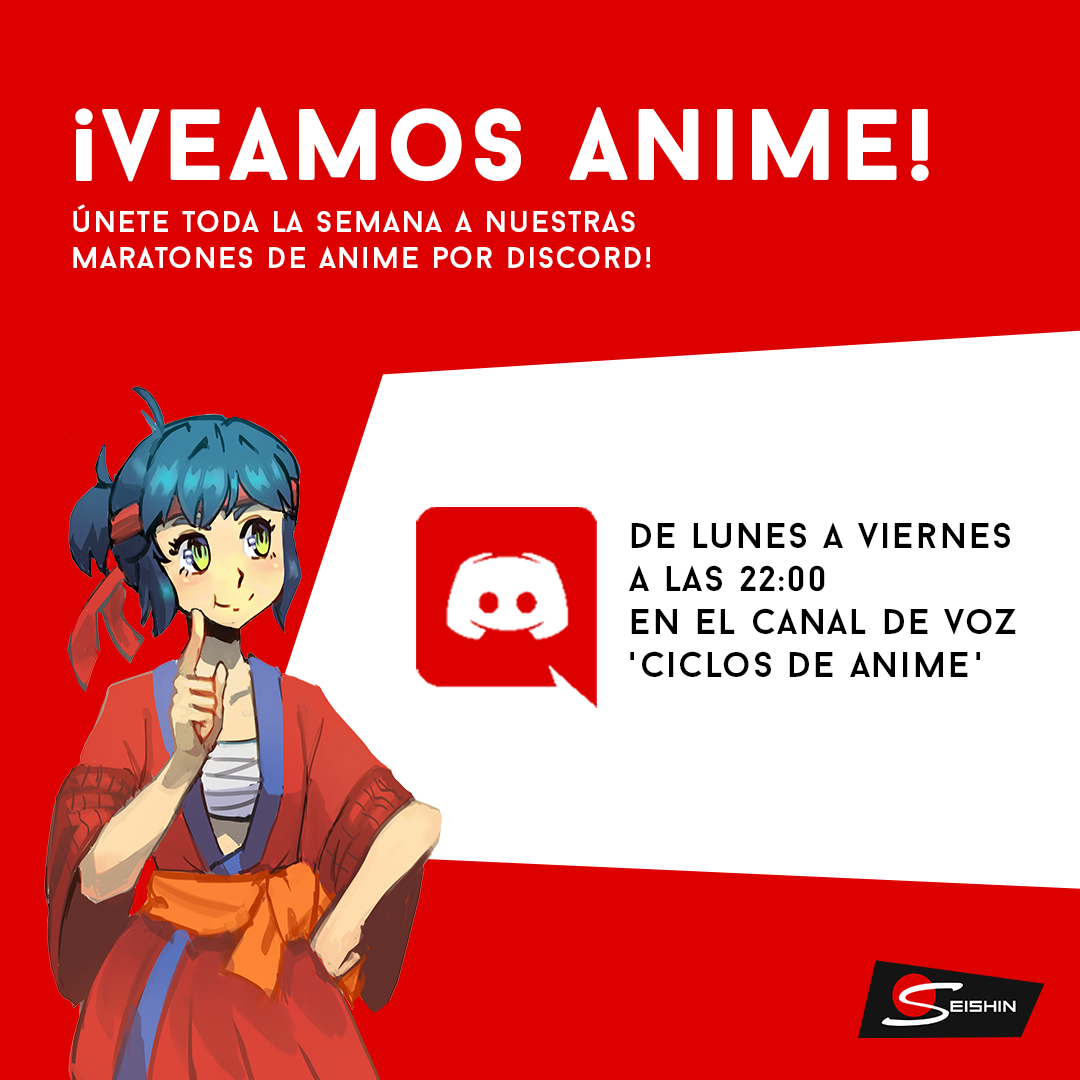
<style>
.page{position:relative;width:1080px;height:1080px;background:#dc0000}
.page>*{position:absolute;margin:0}
.t1{font:102px "BaronNeueBlack";letter-spacing:0.04em;color:#ffffff}
.t2{font:30px "BaronNeue";letter-spacing:0.04em;color:#ffffff}
.t3{font:35.8px "BaronNeue";letter-spacing:0.04em;color:#000000}
</style>
<div class="page">
<p class="t1" style="left:75px;top:107px;width:854px;height:75px">¡veamos anime!</p>
<p class="t2" style="left:73px;top:204px;width:578px;height:64px">únete toda la semana a nuestras<br>maratones de anime por discord!</p>
<p class="t3" style="left:629px;top:522px;width:387px;height:155px">de lunes a viernes <br>a las 22:00<br>en el canal de voz <br>'ciclos de anime'</p>
</div>
